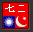
<style>
.page{position:relative;width:33px;height:32px;background:#f20000}
.page>*{position:absolute;margin:0}
.t1{font:10.4px "SimSun";color:#ffffff}
</style>
<div class="page">
<p class="t1" style="left:5px;top:4px;width:20px;height:8px">七二</p>
</div>
